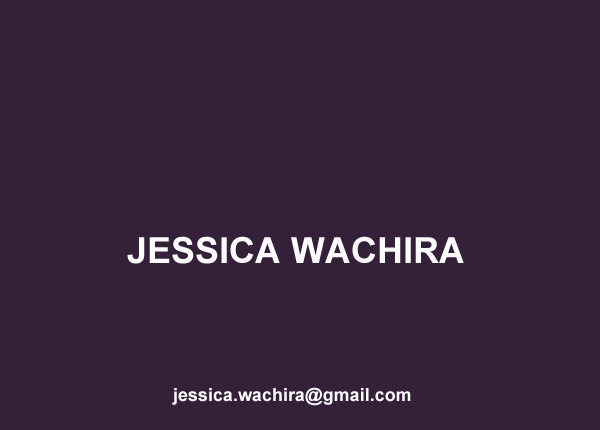
<style>
.page{position:relative;width:600px;height:430px;background:#35203a}
.page>*{position:absolute;margin:0}
.t1{font:36px "Arial-BoldMT";color:#fcfbfc}
.t2{font:18px "Arial-BoldMT";color:#fcfbfc}
</style>
<div class="page">
<p class="t1" style="left:127px;top:236px;width:337px;height:28px">JESSICA WACHIRA</p>
<p class="t2" style="left:172px;top:387px;width:239px;height:19px">jessica.wachira@gmail.com</p>
</div>
